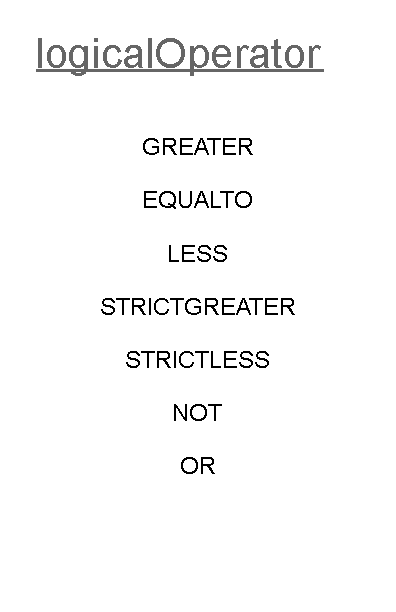
<style>
.page{position:relative;width:396px;height:612px;background:#ffffff}
.page>*{position:absolute;margin:0}
.t1{font:42px "ArialMT";color:#666666}
.t2{font:12px "ArialMT";color:#000000}
</style>
<div class="page">
<p class="t1" style="left:38px;top:38px;width:283px;height:38px">logicalOperator</p>
<p class="t2" style="left:143px;top:138px;width:110px;height:17px">GREATER</p>
<p class="t2" style="left:144px;top:191px;width:108px;height:18px">EQUALTO</p>
<p class="t2" style="left:169px;top:245px;width:58px;height:17px">LESS</p>
<p class="t2" style="left:101px;top:298px;width:194px;height:17px">STRICTGREATER</p>
<p class="t2" style="left:126px;top:351px;width:143px;height:17px">STRICTLESS</p>
<p class="t2" style="left:174px;top:404px;width:48px;height:17px">NOT</p>
<p class="t2" style="left:181px;top:457px;width:34px;height:17px">OR</p>
</div>
